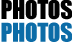
<style>
.page{position:relative;width:72px;height:42px;background:#ffffff}
.page>*{position:absolute;margin:0}
.t1{font:24px/11.4px "Impact";letter-spacing:-0.025em;color:#000000}
.t2{font:24px/11.4px "Impact";letter-spacing:-0.025em;color:#0c6ca7}
</style>
<div class="page">
<p class="t1" style="left:1px;top:0px;width:71px;height:42px;text-align:center">PHOTOS<br><br><span class="t2">PHOTOS</span></p>
</div>
